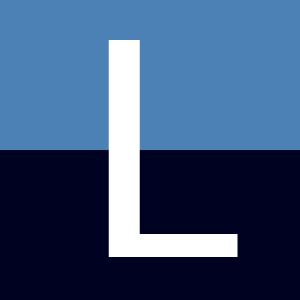
<style>
.page{position:relative;width:300px;height:300px;background:#4b81b4}
.page>*{position:absolute;margin:0}
.t1{font:300px "LucidaGrande";color:#ffffff}
</style>
<div class="page">
<p class="t1" style="left:108px;top:40px;width:130px;height:217px">L</p>
</div>
